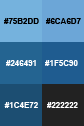
<style>
.page{position:relative;width:84px;height:126px}
.page>*{position:absolute;margin:0}
.t1{font:8px "Arial-BoldMT";color:#000000}
.t2{font:8px "Arial-BoldMT";color:#ffffff}
</style>
<div class="page">
<p class="t1" style="left:4px;top:18px;width:35px;height:6px">#75B2DD</p>
<p class="t1" style="left:46px;top:18px;width:35px;height:6px">#6CA6D7</p>
<p class="t2" style="left:6px;top:60px;width:30px;height:6px">#246491</p>
<p class="t2" style="left:45px;top:60px;width:33px;height:6px">#1F5C90</p>
<p class="t2" style="left:4px;top:102px;width:34px;height:6px">#1C4E72</p>
<p class="t2" style="left:47px;top:102px;width:31px;height:6px">#222222</p>
</div>
